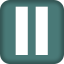
<style>
.page{position:relative;width:64px;height:64px;background:#497977}
.page>*{position:absolute;margin:0}
.t1{font:72px "EthnocentricRg-Regular";color:#ffffff;scale:0.8 1}
</style>
<div class="page">
<p class="t1" style="left:15px;top:6px;width:33px;height:49px">II</p>
</div>
